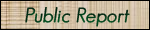
<style>
.page{position:relative;width:150px;height:30px}
.page>*{position:absolute;margin:0}
.t1{font:20px "GeosansLight-Oblique";color:#003817;font-weight:bold}
</style>
<div class="page">
<p class="t1" style="left:25px;top:7px;width:105px;height:20px">Public Report</p>
</div>
